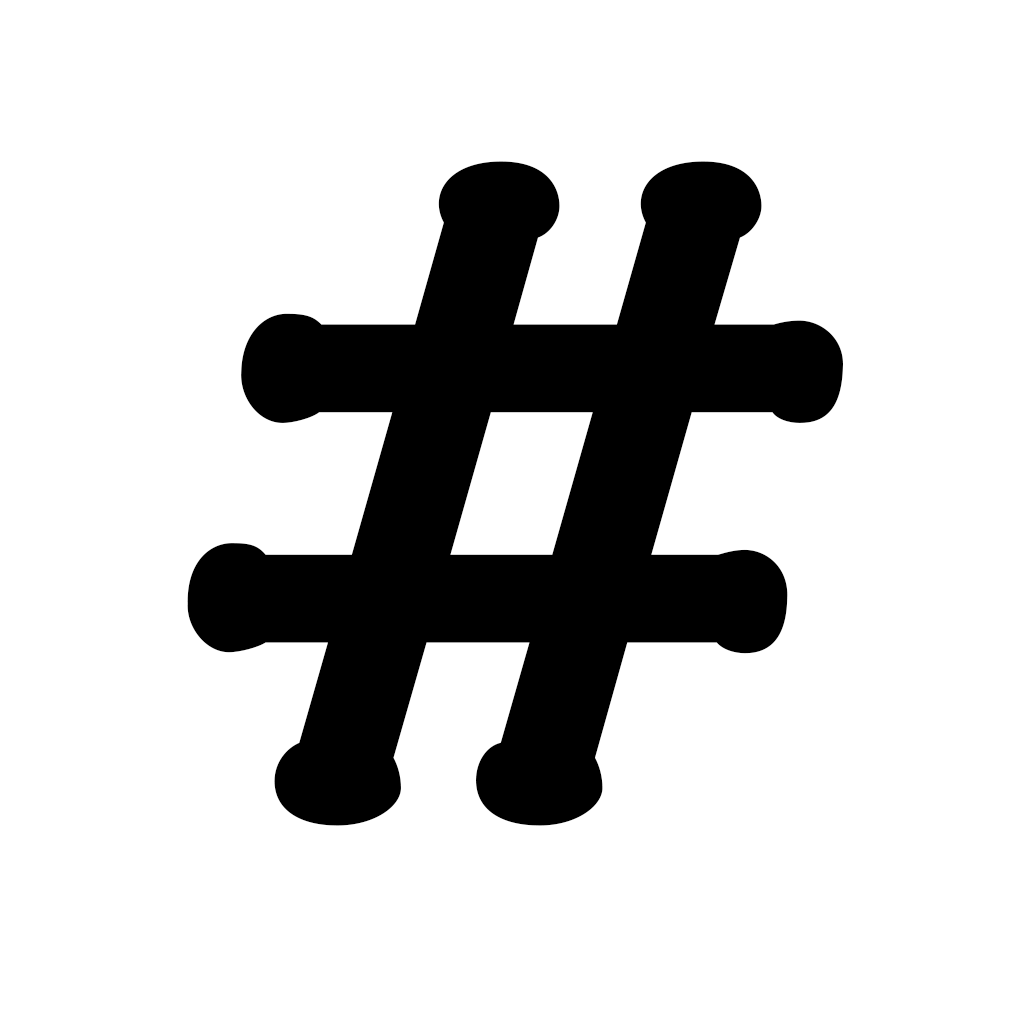
<style>
.page{position:relative;width:1024px;height:1024px;background:#ffffff}
.page>*{position:absolute;margin:0}
.t1{font:975.2px "TektonPro-BoldExt";color:#000000;text-transform:uppercase;font-weight:bold;scale:1.1 1}
</style>
<div class="page">
<p class="t1" style="left:187px;top:161px;width:656px;height:665px">#</p>
</div>
